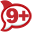
<style>
.page{position:relative;width:32px;height:32px;background:#ffffff}
.page>*{position:absolute;margin:0}
.t1{font:20px "Arial-Black";color:#c1272d}
.t2{font:18px "Arial-Black";color:#c1272d}
</style>
<div class="page">
<p class="t1" style="left:6px;top:8px;width:13px;height:16px">9</p>
<p class="t2" style="left:18px;top:10px;width:11px;height:11px">+</p>
</div>
